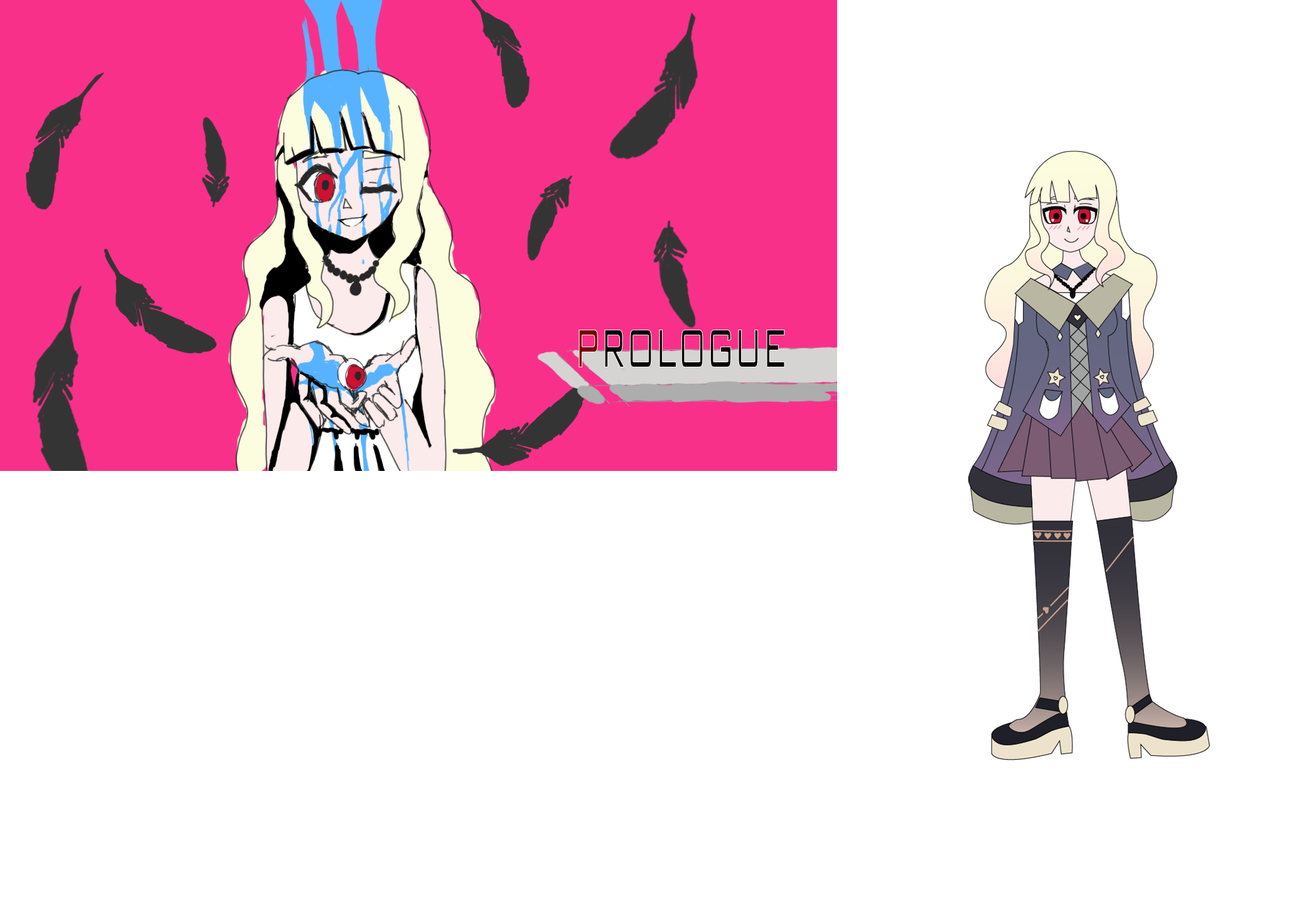
<style>
.page{position:relative;width:1299px;height:918px;background:#ffffff}
.page>*{position:absolute;margin:0}
.t1{font:88.1px "BankGothicBT-Light";color:#000000;scale:0.48 1}
.t2{font:88.1px "BankGothicBT-Light";color:#770000;scale:0.48 1}
</style>
<div class="page">
<p class="t1" style="left:579px;top:330px;width:206px;height:37px"><span class="t2">p</span>rologue</p>
</div>
